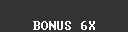
<style>
.page{position:relative;width:128px;height:32px;background:#333333}
.page>*{position:absolute;margin:0}
.t1{font:12px "Terminal";color:#ffffff}
</style>
<div class="page">
<p class="t1" style="left:33px;top:21px;width:62px;height:9px">BONUS 6X</p>
</div>
